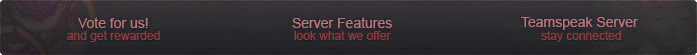
<style>
.page{position:relative;width:697px;height:55px}
.page>*{position:absolute;margin:0}
.t1{font:14px "ArialMT";color:#bc797f}
.t2{font:12px "ArialMT";color:#903e45}
</style>
<div class="page">
<p class="t1" style="left:78px;top:17px;width:70px;height:11px">Vote for us!</p>
<p class="t1" style="left:292px;top:17px;width:100px;height:11px">Server Features</p>
<p class="t1" style="left:521px;top:17px;width:117px;height:13px">Teamspeak Server</p>
<p class="t2" style="left:67px;top:31px;width:93px;height:11px">and get rewarded</p>
<p class="t2" style="left:294px;top:31px;width:97px;height:9px">look what we offer</p>
<p class="t2" style="left:541px;top:31px;width:80px;height:11px">stay connected</p>
</div>
